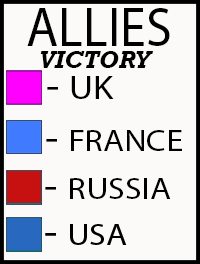
<style>
.page{position:relative;width:200px;height:264px;background:#fcf9f9}
.page>*{position:absolute;margin:0}
.t1{font:55px "MyriadPro-Regular";color:#000000;scale:0.95 1}
.t2{font:24px "Rockwell-BoldItalic";color:#000000}
.t3{font:33.9px "MyriadPro-Regular";color:#000000;scale:1.1 1}
.t4{font:40px "MyriadPro-Regular";color:#000000;scale:1.1 1}
.t5{font:31.2px "MyriadPro-Regular";color:#000000;scale:1.1 1}
</style>
<div class="page">
<p class="t1" style="left:27px;top:8px;width:143px;height:38px">ALLIES</p>
<p class="t2" style="left:40px;top:51px;width:114px;height:17px">VICTORY</p>
<p class="t3" style="left:47px;top:76px;width:67px;height:23px"><span class="t4">- </span>UK</p>
<p class="t5" style="left:46px;top:130px;width:136px;height:21px"><span class="t4">- </span>FRANCE</p>
<p class="t5" style="left:45px;top:178px;width:126px;height:21px"><span class="t4">- </span>RUSSIA</p>
</div>
